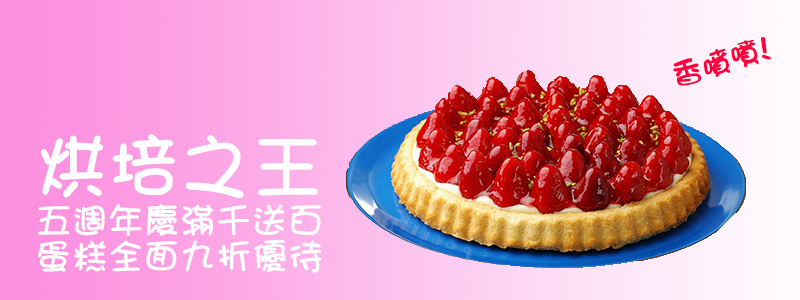
<style>
.page{position:relative;width:800px;height:300px}
.page>*{position:absolute;margin:0}
.t1{font:30px "DFGirl-W7-HKP-BF";color:#ff013d}
.t2{font:36px/36px "DFGirl-W7-HKP-BF";color:#ffffff}
.t3{font:72px/72px "DFGirl-W7-HKP-BF";color:#ffffff}
</style>
<div class="page">
<p class="t1" style="left:673px;top:37px;width:98px;height:49px;rotate:-15deg">香噴噴!</p>
<p class="t2" style="left:38px;top:134px;width:284px;height:139px"><span class="t3">烘培之王<br></span>五週年慶滿千送百<br>蛋糕全面九折優待</p>
</div>
